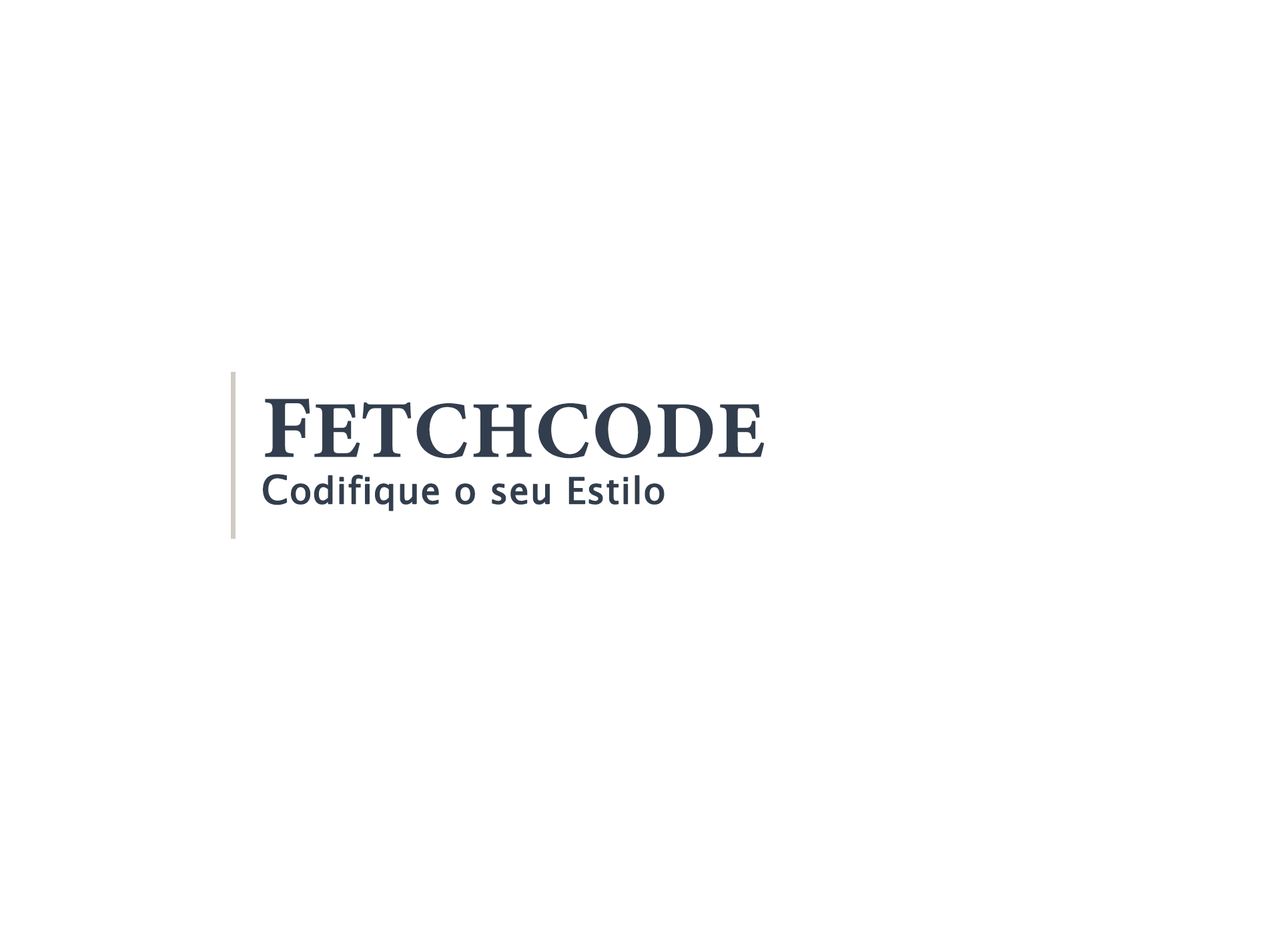
<style>
.page{position:relative;width:1261px;height:946px;background:#ffffff}
.page>*{position:absolute;margin:0}
.t1{font:36.1px "LucidaSansUnicode";color:#323e4d;font-weight:bold}
.t2{font:89px "MinionConceptRoman-Bold";color:#323e4d;font-weight:bold}
.t3{font:80.6px "MinionConceptRoman-Bold";color:#323e4d;font-weight:bold}
.t4{font:38.9px "LucidaSansUnicode";color:#323e4d;font-weight:bold}
</style>
<div class="page">
<p class="t1" style="left:263px;top:398px;width:502px;height:113px"><span class="t2">F</span><span class="t3">ETCHCODE<br></span><span class="t4">C</span>odifique o seu Estilo</p>
</div>
